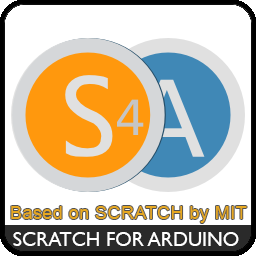
<style>
.page{position:relative;width:256px;height:256px;background:#ffffff}
.page>*{position:absolute;margin:0}
.t1{font:18px "ArialMT";letter-spacing:0.025em;color:#e6a822}
.t2{font:20px "GillSansMT";color:#ffffff}
</style>
<div class="page">
<p class="t1" style="left:11px;top:206px;width:236px;height:17px">Based on SCRATCH by MIT</p>
<p class="t2" style="left:13px;top:232px;width:226px;height:14px">SCRATCH FOR ARDUINO</p>
</div>
